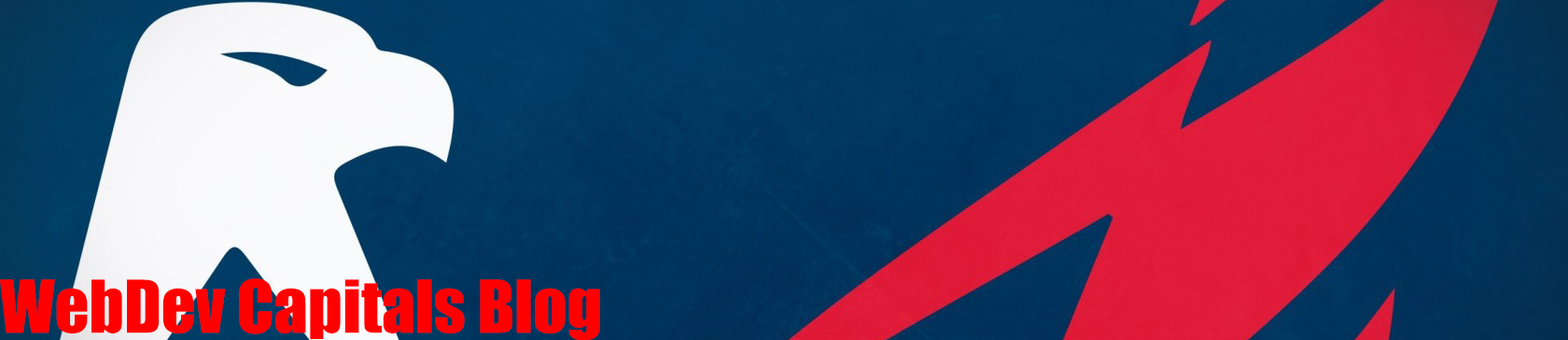
<style>
.page{position:relative;width:1568px;height:340px}
.page>*{position:absolute;margin:0}
.t1{font:67.2px "Impact";color:#ff0000}
</style>
<div class="page">
<p class="t1" style="left:0px;top:278px;width:600px;height:63px">WebDev Capitals Blog</p>
</div>
